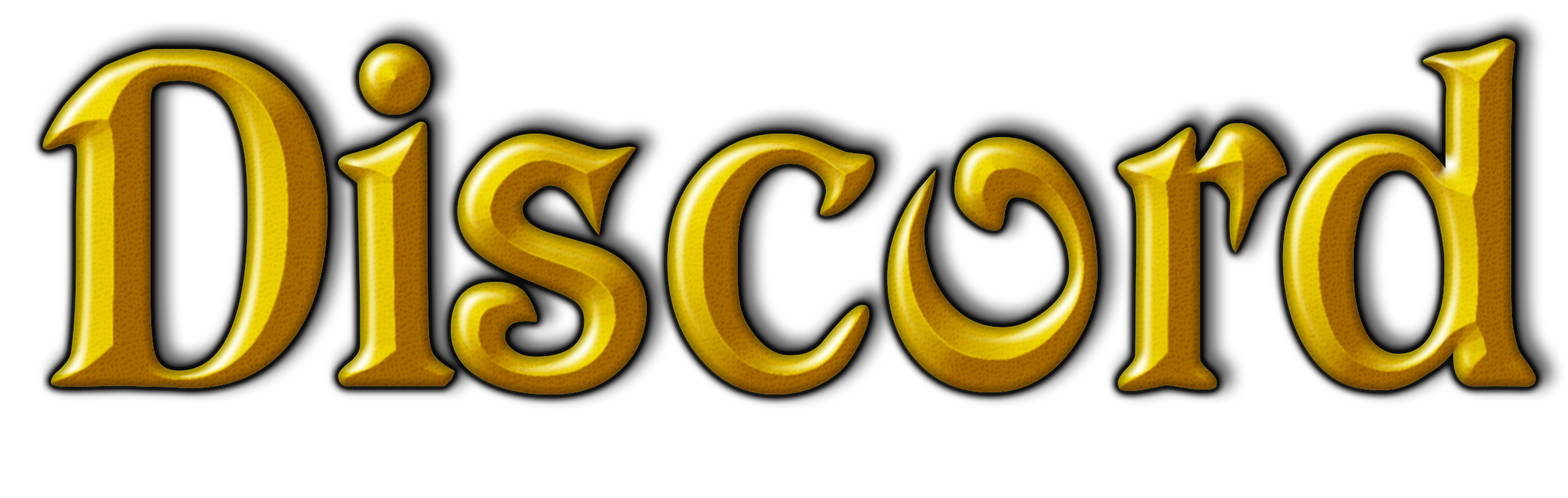
<style>
.page{position:relative;width:1568px;height:498px;background:#ffffff}
.page>*{position:absolute;margin:0}
.t1{font:472.2px "Avatar";letter-spacing:-0.01em}
</style>
<div class="page">
<p class="t1" style="left:43px;top:38px;width:1493px;height:357px">Discord</p>
<p class="t1" style="left:43px;top:38px;width:1493px;height:357px">Discord</p>
</div>
